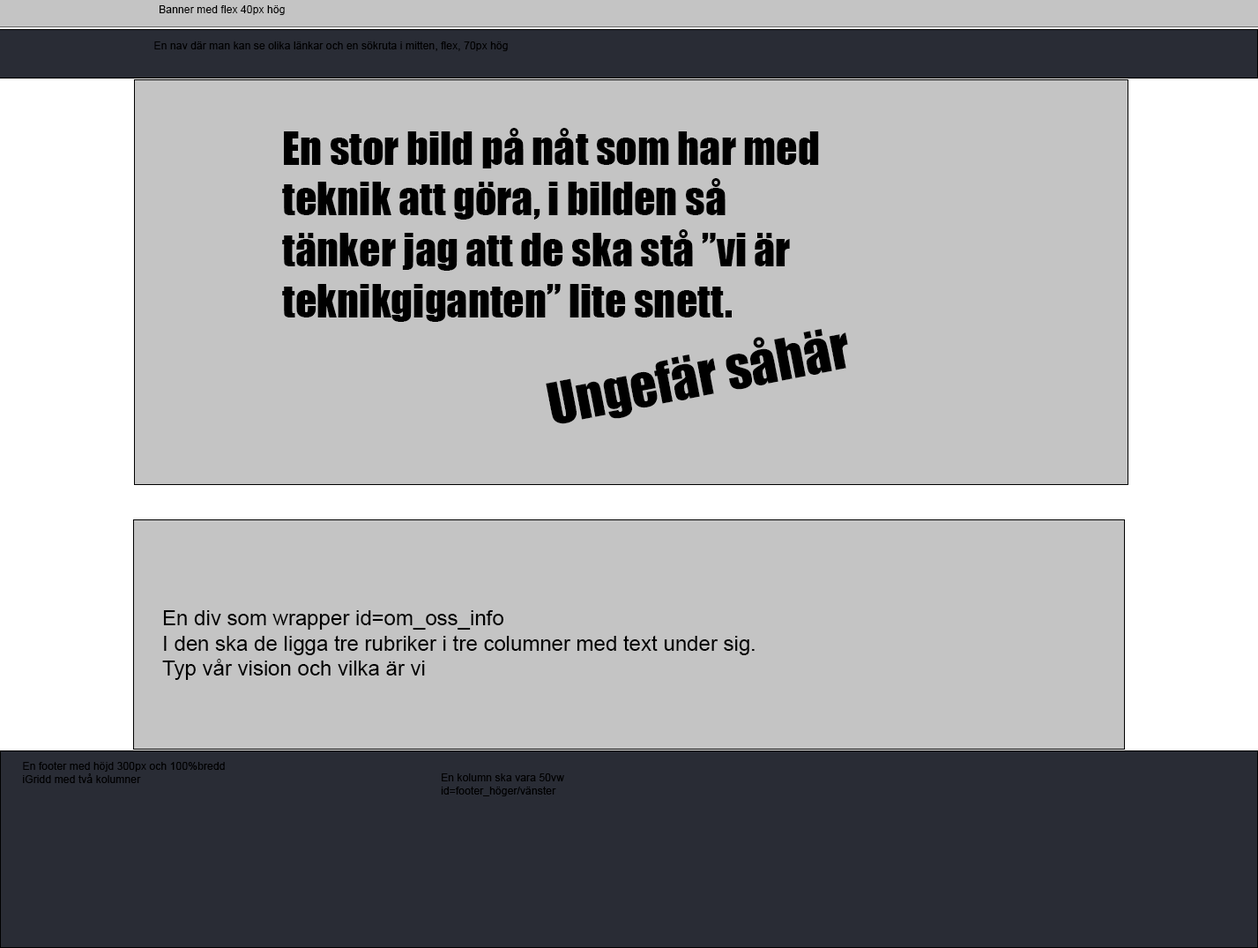
<style>
.page{position:relative;width:1258px;height:948px;background:#c4c4c4}
.page>*{position:absolute;margin:0}
.t1{font:10.8px "ArialMT";color:#000000}
.t2{font:42.3px "Impact";color:#000000}
.t3{font:52.9px "Impact";color:#000000}
.t4{font:21.2px "ArialMT";color:#000000}
</style>
<div class="page">
<p class="t1" style="left:160px;top:5px;width:125px;height:10px">Banner med flex 40px hög</p>
<p class="t1" style="left:154px;top:41px;width:354px;height:10px">En nav där man kan se olika länkar och en sökruta i mitten, flex, 70px hög</p>
<p class="t2" style="left:282px;top:128px;width:537px;height:194px">En stor bild på nåt som har med teknik att göra, i bilden så tänker jag att de ska stå ”vi är teknikgiganten” lite snett.</p>
<p class="t3" style="left:546px;top:329px;width:302px;height:95px;rotate:-11deg">Ungefär såhär</p>
<p class="t4" style="left:162px;top:610px;width:593px;height:70px">En div som wrapper id=om_oss_info<br>I den ska de ligga tre rubriker i tre columner med text under sig.<br>Typ vår vision och vilka är vi</p>
<p class="t1" style="left:23px;top:762px;width:202px;height:21px">En footer med höjd 300px och 100%bredd<br>iGridd med två kolumner</p>
<p class="t1" style="left:441px;top:773px;width:123px;height:23px">En kolumn ska vara 50vw id=footer_höger/vänster</p>
</div>
